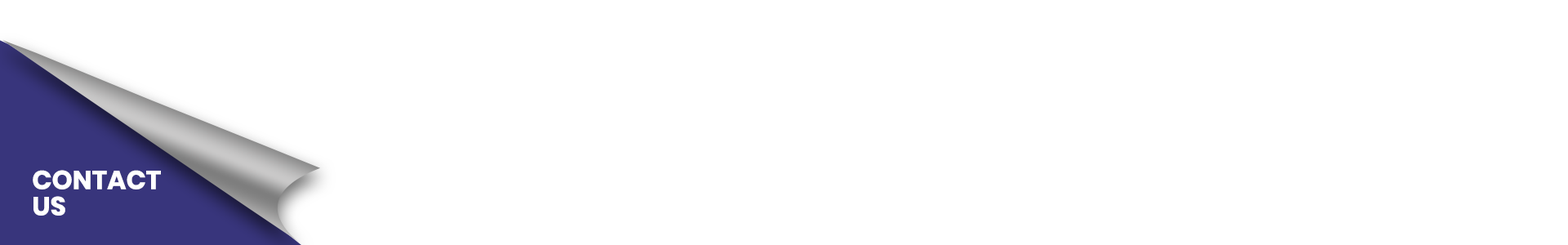
<style>
.page{position:relative;width:1568px;height:245px;background:#ffffff}
.page>*{position:absolute;margin:0}
.t1{font:26.1px "Poppins-Bold";color:#ffffff}
</style>
<div class="page">
<p class="t1" style="left:33px;top:170px;width:128px;height:19px">CONTACT</p>
<p class="t1" style="left:33px;top:196px;width:32px;height:20px">US</p>
</div>
